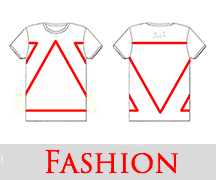
<style>
.page{position:relative;width:216px;height:180px;background:#ffffff}
.page>*{position:absolute;margin:0}
.t1{font:30px "TrajanPro3-Regular";color:#ff0000}
</style>
<div class="page">
<p class="t1" style="left:45px;top:149px;width:133px;height:25px">Fashion</p>
</div>
